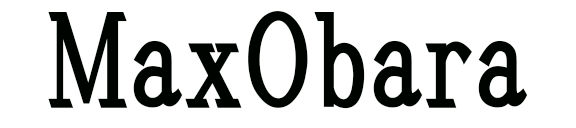
<style>
.page{position:relative;width:576px;height:128px;background:#ffffff}
.page>*{position:absolute;margin:0}
.t1{font:121.4px "HGPSoeiPresenceEB";color:#000400}
</style>
<div class="page">
<p class="t1" style="left:48px;top:11px;width:480px;height:98px">MaxObara</p>
</div>
